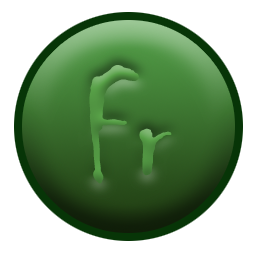
<style>
.page{position:relative;width:256px;height:256px;background:#ffffff}
.page>*{position:absolute;margin:0}
.t1{font:150px "Chiller-Regular";color:#519542}
</style>
<div class="page">
<p class="t1" style="left:89px;top:65px;width:83px;height:119px">Fr</p>
</div>
